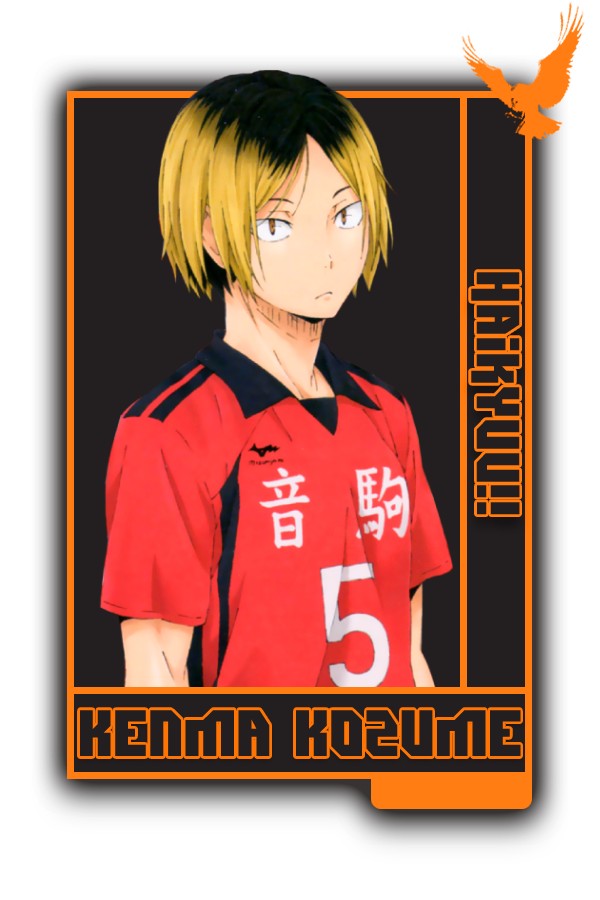
<style>
.page{position:relative;width:600px;height:900px;background:#231e1f}
.page>*{position:absolute;margin:0}
.t1{font:60.7px "Dimitri";color:#231f20}
.t2{font:65.2px "Dimitri";color:#231f20}
</style>
<div class="page">
<p class="t1" style="left:471px;top:272px;width:49px;height:243px;rotate:90deg">Haikyuu!!</p>
<p class="t2" style="left:79px;top:710px;width:442px;height:46px">Kenma Kozume</p>
</div>
